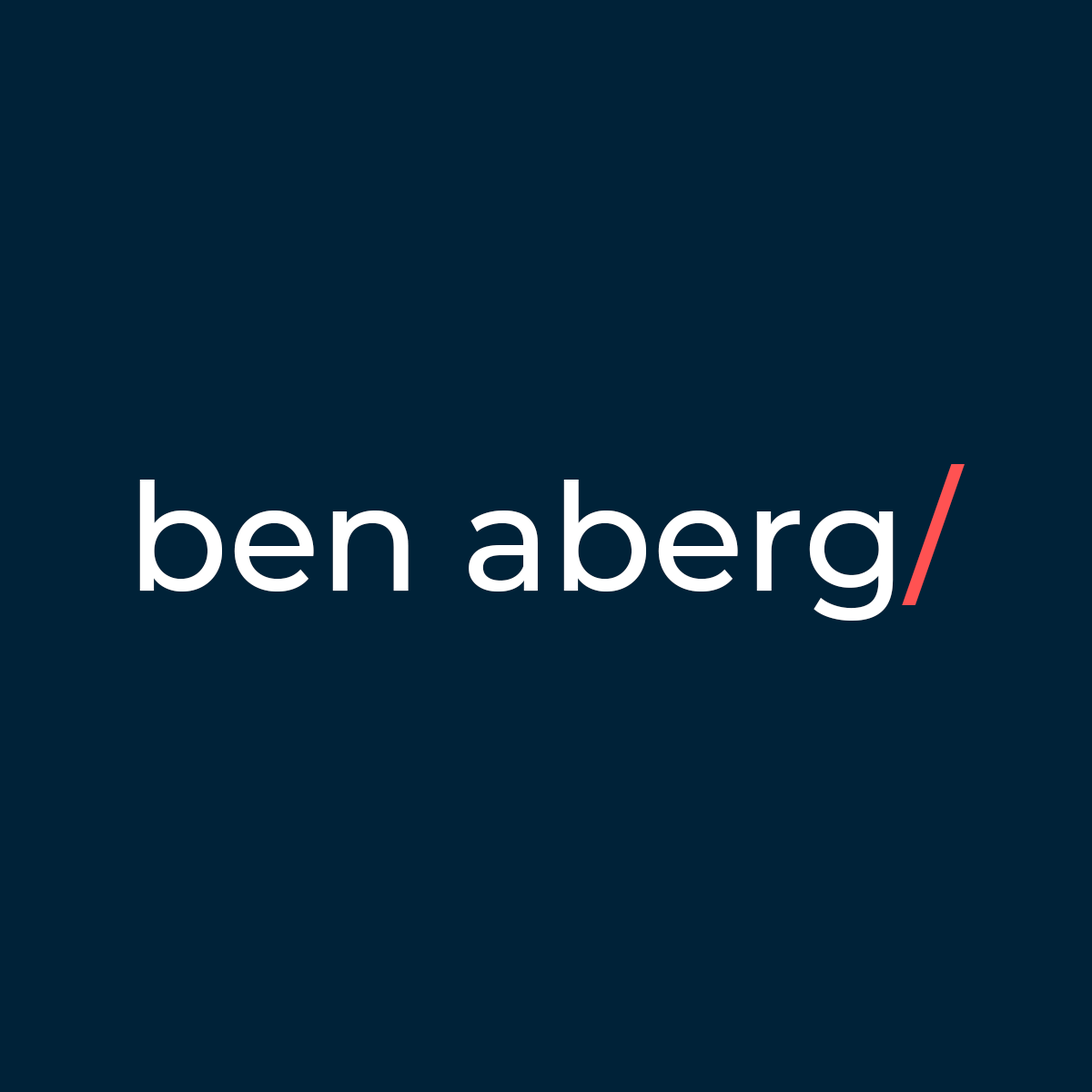
<style>
.page{position:relative;width:1092px;height:1092px;background:#002238}
.page>*{position:absolute;margin:0}
.t1{font:149.4px "Montserrat-Medium";color:#ffffff}
.t2{font:149.4px "Montserrat-Medium";color:#ff5252}
</style>
<div class="page">
<p class="t1" style="left:139px;top:464px;width:826px;height:157px">ben aberg<span class="t2">/</span></p>
</div>
